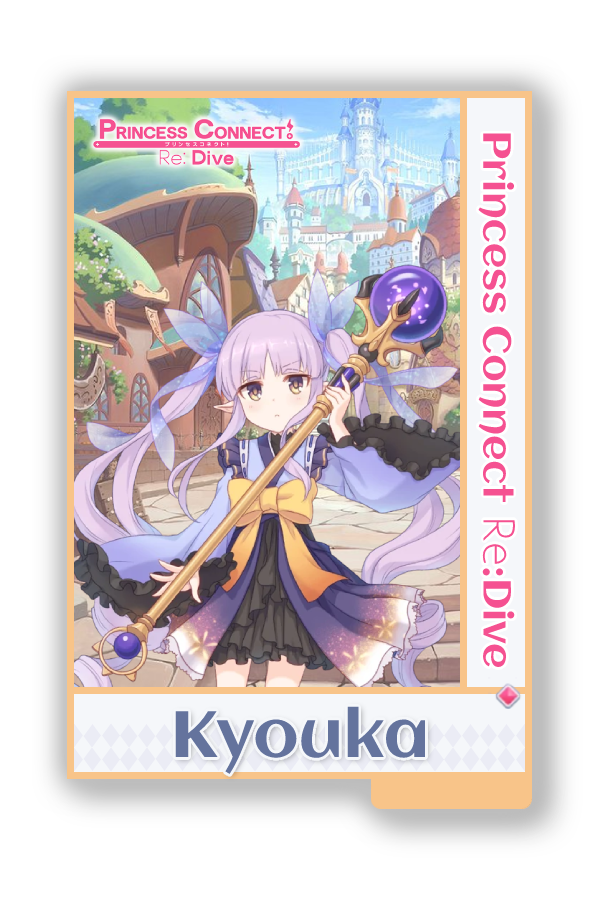
<style>
.page{position:relative;width:600px;height:900px;background:#ffffff}
.page>*{position:absolute;margin:0}
.t1{font:39px "Aclonica-Regular";color:#f55191}
.t2{font:39px "AaarghNormal";color:#f55191}
.t3{font:65px "Aclonica-Regular";color:#64739d}
</style>
<div class="page">
<p class="t1" style="left:478px;top:133px;width:38px;height:534px;rotate:90deg">Princess Connect <span class="t2">Re</span>:Dive</p>
<p class="t3" style="left:175px;top:706px;width:250px;height:68px">Kyouka</p>
</div>
